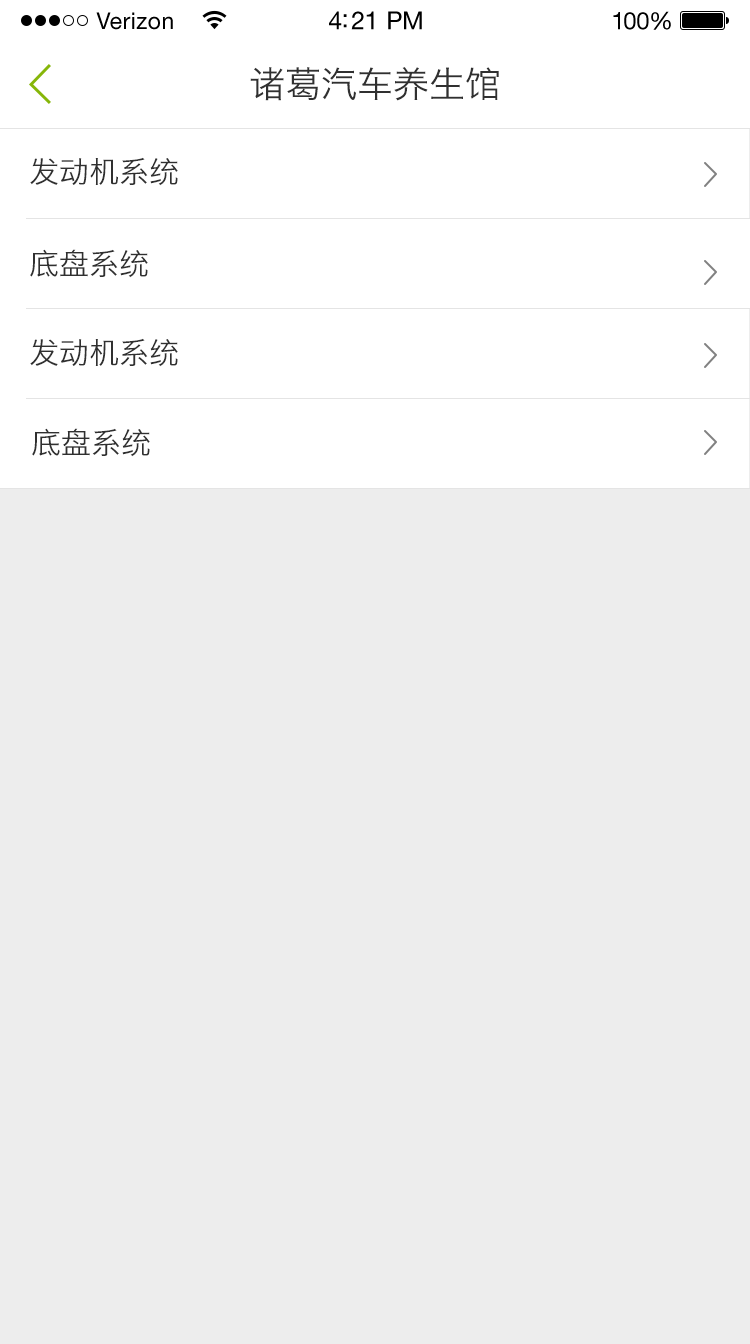
<style>
.page{position:relative;width:750px;height:1344px;background:#ededed}
.page>*{position:absolute;margin:0}
.t1{font:36px "HiraginoSansGB-W3";color:#303030}
.t2{font:30px "HiraginoSansGB-W3";color:#303030}
</style>
<div class="page">
<p class="t1" style="left:250px;top:67px;width:249px;height:34px">诸葛汽车养生馆</p>
<p class="t2" style="left:30px;top:157px;width:148px;height:29px">发动机系统</p>
<p class="t2" style="left:30px;top:249px;width:118px;height:29px">底盘系统</p>
<p class="t2" style="left:30px;top:338px;width:148px;height:29px">发动机系统</p>
<p class="t2" style="left:32px;top:428px;width:118px;height:29px">底盘系统</p>
</div>
